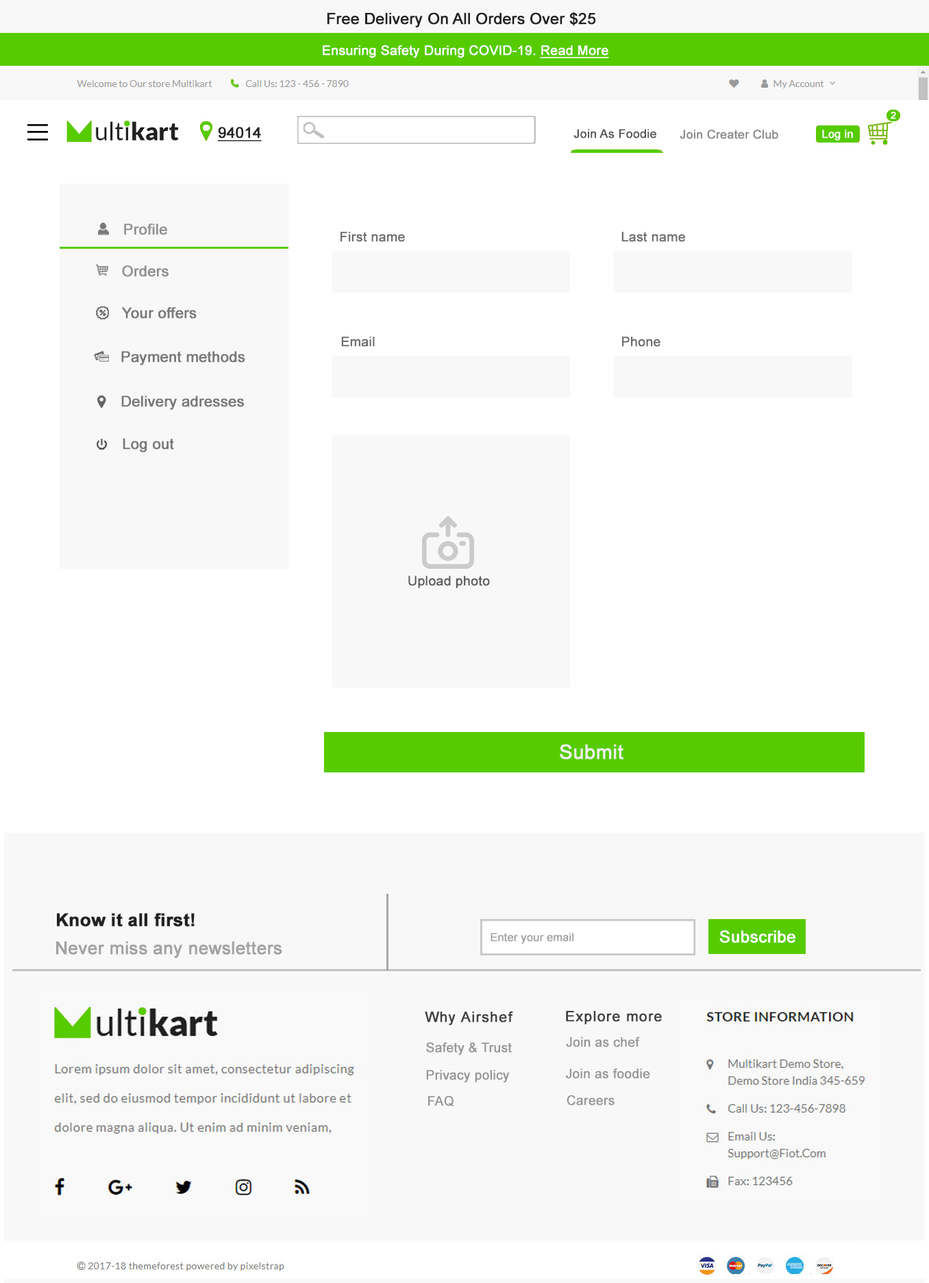
<style>
.page{position:relative;width:929px;height:1283px;background:#ffffff}
.page>*{position:absolute;margin:0}
.t1{font:15.4px "ArialMT";color:#222222;font-weight:bold}
.t2{font:13.2px "ArialMT";color:#ffffff;font-weight:bold}
.t3{font:13.2px "ArialMT";color:#ffffff;font-weight:bold;text-decoration:underline}
.t4{font:9.8px "ArialMT";color:#ffffff;font-weight:bold}
.t5{font:15px "ArialMT";color:#222222;font-weight:bold;text-decoration:underline}
.t6{font:12px "ArialMT";color:#585757;font-weight:bold}
.t7{font:12px "ArialMT";color:#8a8888;font-weight:bold}
.t8{font:11px "ArialMT";color:#ffffff;font-weight:bold}
.t9{font:14.7px "ArialMT";color:#919191;font-weight:bold}
.t10{font:13.2px "ArialMT";color:#6e6e6e;font-weight:bold}
.t11{font:14.7px "ArialMT";color:#8e8e8e;font-weight:bold}
.t12{font:14.7px "ArialMT";color:#787878;font-weight:bold}
.t13{font:13.2px "ArialMT";color:#606060;font-weight:bold}
.t14{font:19.7px "ArialMT";color:#eeeeee;font-weight:bold}
.t15{font:17.6px "Arial-BoldMT";color:#222222;font-weight:bold}
.t16{font:17.6px "ArialMT";color:#a3a2a2;font-weight:bold}
.t17{font:10.9px "ArialMT";color:#a3a2a2;font-weight:bold}
.t18{font:16.4px "ArialMT";color:#ffffff;font-weight:bold}
.t19{font:14.3px "ArialMT";letter-spacing:0.05em;color:#414141;font-weight:bold}
.t20{font:14.3px "ArialMT";letter-spacing:0.05em;color:#3e3e3e;font-weight:bold}
.t21{font:12.9px "ArialMT";color:#989797;font-weight:bold}
.t22{font:12.9px "ArialMT";color:#979696;font-weight:bold}
</style>
<div class="page">
<p class="t1" style="left:327px;top:12px;width:269px;height:15px">Free Delivery On All Orders Over $25</p>
<p class="t2" style="left:323px;top:45px;width:286px;height:13px">Ensuring Safety During COVID-19. <span class="t3">Read More</span></p>
<p class="t4" style="left:891px;top:112px;width:5px;height:7px">2</p>
<p class="t5" style="left:217px;top:127px;width:45px;height:14px">94014</p>
<p class="t6" style="left:574px;top:129px;width:83px;height:9px">Join As Foodie</p>
<p class="t7" style="left:680px;top:130px;width:99px;height:9px">Join Creater Club</p>
<p class="t8" style="left:822px;top:130px;width:31px;height:11px">Log in</p>
<p class="t9" style="left:124px;top:223px;width:43px;height:12px">Profile</p>
<p class="t10" style="left:341px;top:232px;width:64px;height:10px">First name</p>
<p class="t10" style="left:622px;top:232px;width:63px;height:10px">Last name</p>
<p class="t11" style="left:122px;top:265px;width:47px;height:12px">Orders</p>
<p class="t12" style="left:121px;top:307px;width:76px;height:12px">Your offers</p>
<p class="t10" style="left:341px;top:337px;width:34px;height:10px">Email</p>
<p class="t10" style="left:622px;top:337px;width:39px;height:10px">Phone</p>
<p class="t12" style="left:121px;top:351px;width:124px;height:14px">Payment methods</p>
<p class="t12" style="left:121px;top:395px;width:123px;height:15px">Delivery adresses</p>
<p class="t12" style="left:123px;top:438px;width:51px;height:14px">Log out</p>
<p class="t13" style="left:408px;top:576px;width:82px;height:12px">Upload photo</p>
<p class="t14" style="left:560px;top:744px;width:64px;height:15px">Submit</p>
<p class="t15" style="left:57px;top:913px;width:138px;height:14px">Know it all first!</p>
<p class="t16" style="left:56px;top:941px;width:226px;height:17px">Never miss any newsletters</p>
<p class="t17" style="left:491px;top:933px;width:83px;height:11px">Enter your email</p>
<p class="t18" style="left:720px;top:930px;width:76px;height:13px">Subscribe</p>
<p class="t19" style="left:425px;top:1011px;width:88px;height:14px">Why Airshef</p>
<p class="t20" style="left:566px;top:1011px;width:96px;height:14px">Explore more</p>
<p class="t21" style="left:566px;top:1037px;width:74px;height:10px">Join as chef</p>
<p class="t22" style="left:426px;top:1042px;width:86px;height:13px">Safety &amp; Trust</p>
<p class="t22" style="left:426px;top:1070px;width:84px;height:13px">Privacy policy</p>
<p class="t21" style="left:566px;top:1069px;width:84px;height:10px">Join as foodie</p>
<p class="t22" style="left:428px;top:1096px;width:26px;height:11px">FAQ</p>
<p class="t21" style="left:567px;top:1095px;width:48px;height:11px">Careers</p>
</div>
